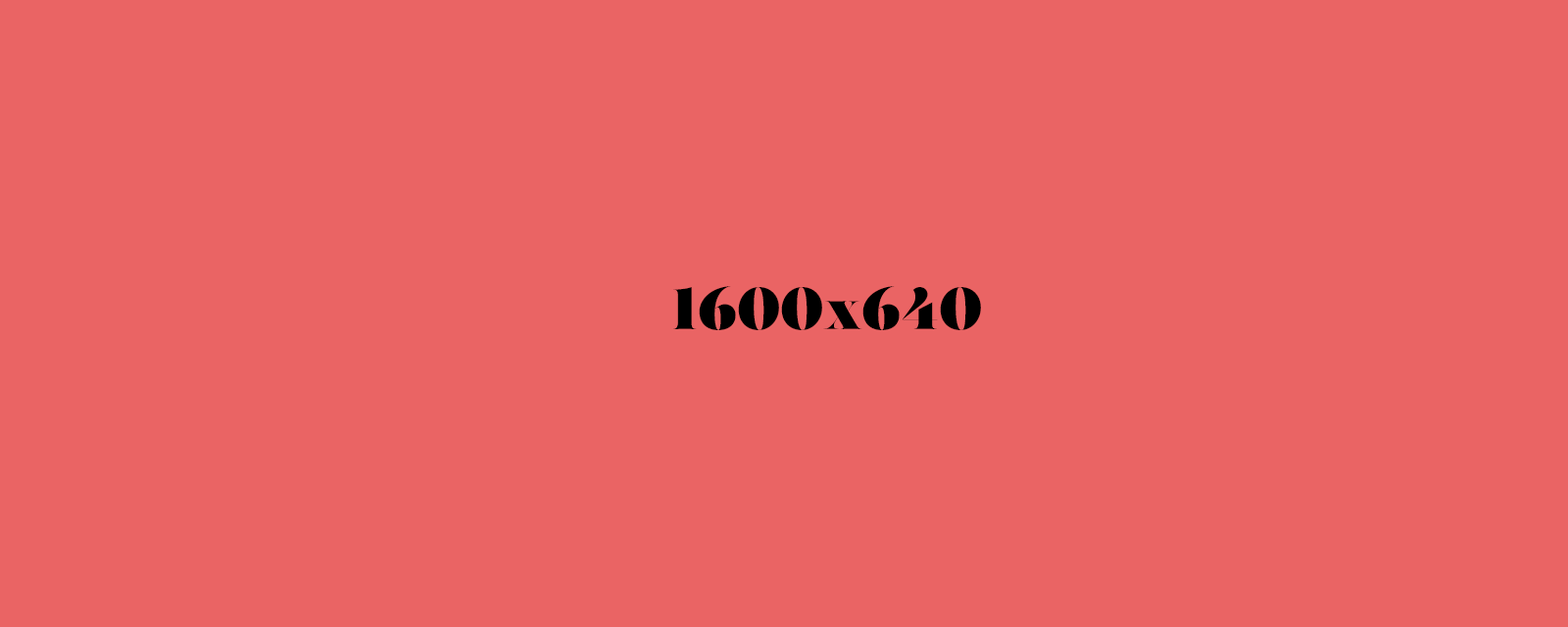
<style>
.page{position:relative;width:1568px;height:627px;background:#ea6464}
.page>*{position:absolute;margin:0}
.t1{font:58.8px "Salome-Fine";color:#000000}
</style>
<div class="page">
<p class="t1" style="left:673px;top:286px;width:308px;height:44px">1600x640</p>
</div>
